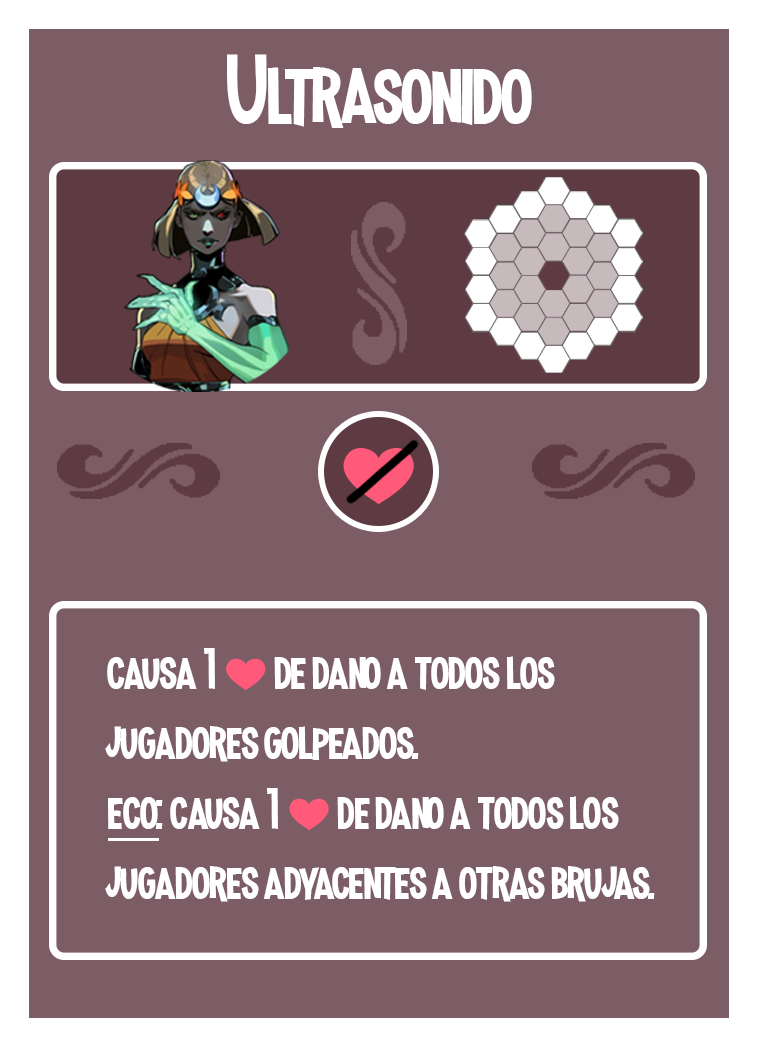
<style>
.page{position:relative;width:758px;height:1047px;background:#7d5d65}
.page>*{position:absolute;margin:0}
.t1{font:100px "MadnessHyperactive";color:#ffffff}
.t2{font:58.3px "MadnessHyperactive";color:#ffffff}
.t3{font:41.7px "EmojiOneColor";color:#ffffff}
</style>
<div class="page">
<p class="t1" style="left:227px;top:54px;width:305px;height:74px">Ultrasonido</p>
<p class="t2" style="left:105px;top:648px;width:550px;height:254px">causa 1 <span class="t3">❤️ </span>de dano a todos los jugadores golpeados.<br>eco: causa 1 <span class="t3">❤️ </span>de dano a todos los jugadores adyacentes a otras brujas.</p>
</div>
